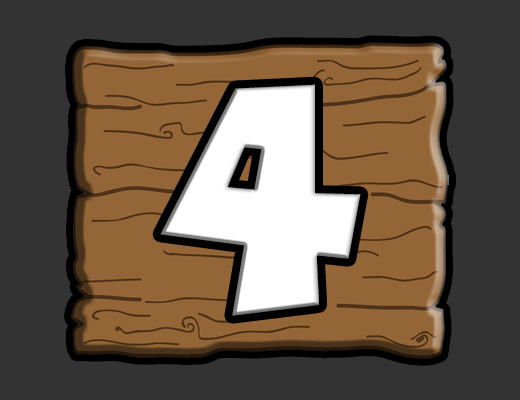
<style>
.page{position:relative;width:520px;height:400px;background:#333333}
.page>*{position:absolute;margin:0}
.t1{font:300px "Funhouse";color:#ffffff}
</style>
<div class="page">
<p class="t1" style="left:160px;top:84px;width:201px;height:232px">4</p>
</div>
